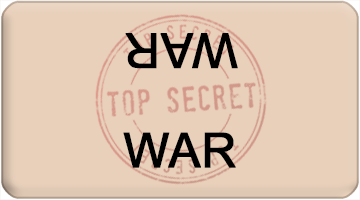
<style>
.page{position:relative;width:360px;height:200px;background:#e8d0bb}
.page>*{position:absolute;margin:0}
.t1{font:48px "ArialMT";color:#000000;font-weight:bold}
</style>
<div class="page">
<p class="t1" style="left:125px;top:33px;width:113px;height:36px;rotate:180deg">WAR</p>
<p class="t1" style="left:123px;top:132px;width:113px;height:36px">WAR</p>
</div>
